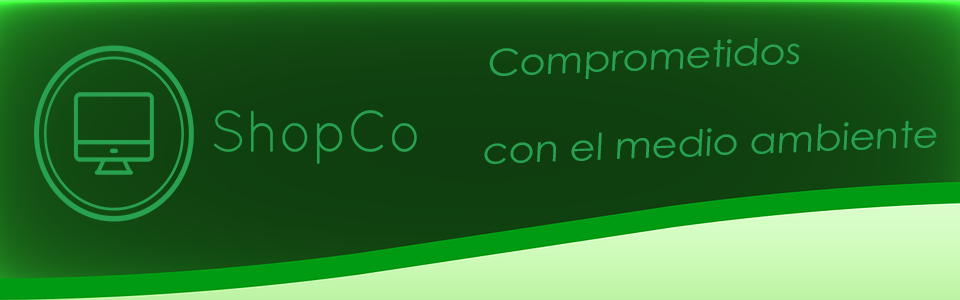
<style>
.page{position:relative;width:960px;height:300px}
.page>*{position:absolute;margin:0}
.t1{font:36.9px "CenturyGothic";color:#28a150;scale:1.08 1}
</style>
<div class="page">
<p class="t1" style="left:484px;top:38px;width:453px;height:126px;rotate:-2deg">Comprometidos<br> <br>con el medio ambiente</p>
</div>
